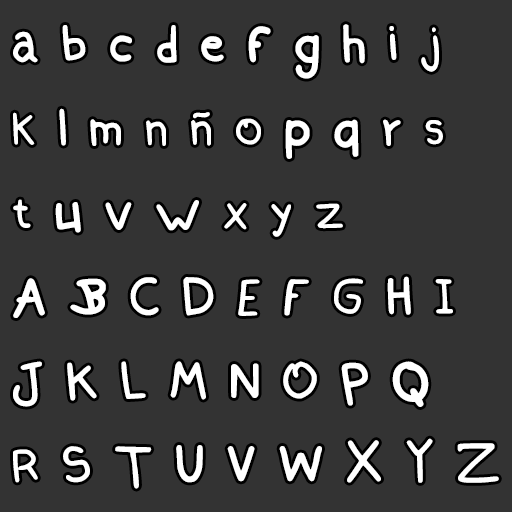
<style>
.page{position:relative;width:512px;height:512px;background:#333333}
.page>*{position:absolute;margin:0}
.t1{font:70px "Brutal_bounce-Regular";color:#ffffff}
</style>
<div class="page">
<p class="t1" style="left:13px;top:24px;width:486px;height:465px">a b c d e f g h i j <br>k l m n ñ o p q r s <br>t u v w x y z<br>A B C D E F G H I<br>J K L M N O P Q <br>R S T U V W X Y Z</p>
</div>
